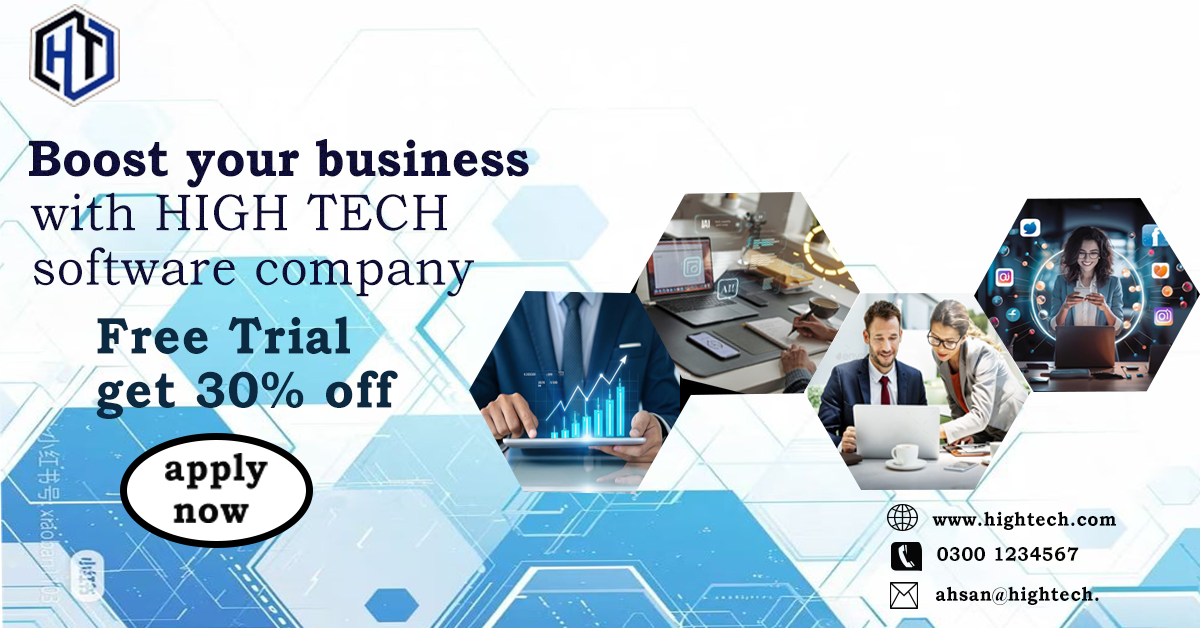
<style>
.page{position:relative;width:1200px;height:628px;background:#fefefe}
.page>*{position:absolute;margin:0}
.t1{font:52.1px/54.3px "BookmanOldStyle";letter-spacing:0.025em;scale:0.92 1}
.t2{font:39.1px/38.2px "BookmanOldStyle-Bold";letter-spacing:0.025em;scale:0.92 1}
.t3{font:51.8px/54.3px "BookmanOldStyle-Bold";letter-spacing:0.005em;scale:0.92 1}
.t4{font:52.1px/34.2px "BookmanOldStyle";letter-spacing:0.025em;scale:0.92 1}
.t5{font:51.8px/54px "BookmanOldStyle-Bold";letter-spacing:0.025em;color:#0b2a42;scale:0.93 1}
.t6{font:19.4px "BookmanOldStyle-Bold";letter-spacing:0.025em;color:#070606;scale:0.93 1}
.t7{font:51.8px "BookmanOldStyle";letter-spacing:0.025em;color:#070606;scale:0.93 1}
</style>
<div class="page">
<p class="t1" style="left:29px;top:139px;width:500px;height:158px"><span class="t2">  </span><span class="t3">Boost your business <br></span>  with HIGH TECH <br>  software <span class="t4">company</span></p>
<p class="t5" style="left:96px;top:316px;width:302px;height:103px">Free Trial <br>get 30% off</p>
<p class="t6" style="left:932px;top:511px;width:184px;height:19px"><span class="t7">   </span>www.hightech.com</p>
<p class="t6" style="left:937px;top:547px;width:142px;height:15px">0300 1234567</p>
</div>
